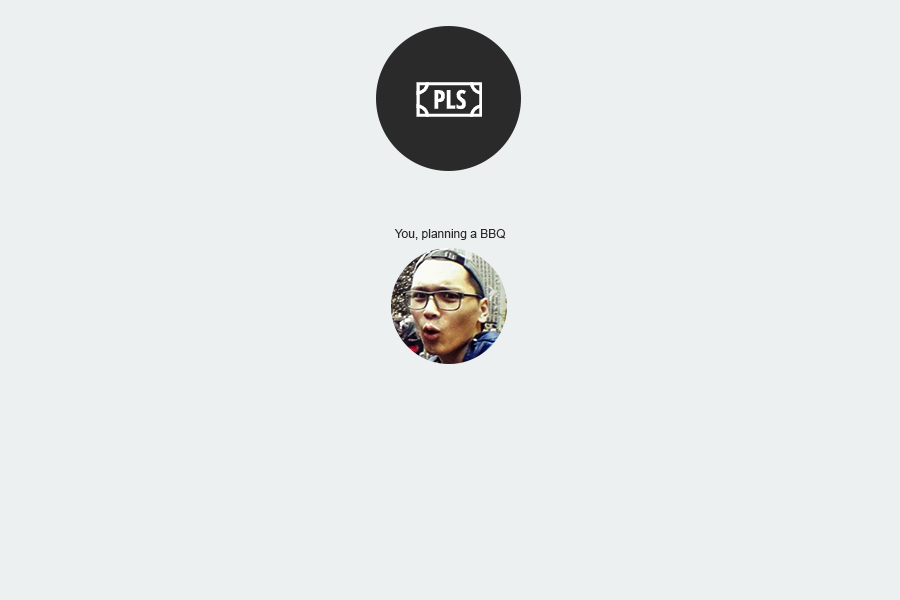
<style>
.page{position:relative;width:900px;height:600px;background:#ecf0f1}
.page>*{position:absolute;margin:0}
.t1{font:12px "ArialMT";color:#2a2a2a}
</style>
<div class="page">
<p class="t1" style="left:394px;top:229px;width:112px;height:11px">You, planning a BBQ</p>
</div>
